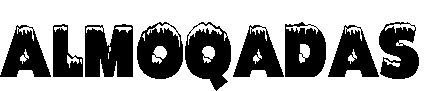
<style>
.page{position:relative;width:438px;height:91px;background:#ffffff}
.page>*{position:absolute;margin:0}
.t1{font:83px "Chilled";color:#000000;scale:0.66 1}
</style>
<div class="page">
<p class="t1" style="left:0px;top:22px;width:419px;height:69px">ALMOQADAS</p>
</div>
